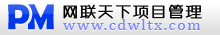
<style>
.page{position:relative;width:220px;height:35px}
.page>*{position:absolute;margin:0}
.t1{font:36px "BerlinSansFBDemi-Bold";letter-spacing:0.23em}
.t2{font:16px "ZHSRXT--GBK1-0";letter-spacing:0.075em;color:#000000;font-weight:bold}
.t3{font:16px "Cambria";letter-spacing:0.1em}
.t4{font:16px "Cambria";letter-spacing:0.1em;color:#7680ff}
</style>
<div class="page">
<p class="t1" style="left:8px;top:5px;width:22px;height:26px">P</p>
<p class="t1" style="left:8px;top:4px;width:22px;height:26px">P</p>
<p class="t2" style="left:63px;top:5px;width:139px;height:15px">网联天下项目管理</p>
<p class="t2" style="left:63px;top:4px;width:139px;height:15px">网联天下项目管理</p>
<p class="t3" style="left:63px;top:20px;width:138px;height:11px">www.cdwltx.com</p>
<p class="t4" style="left:63px;top:19px;width:138px;height:11px">www.cdwltx.com</p>
</div>
